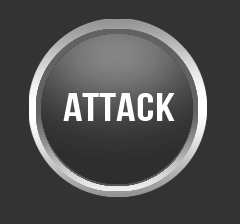
<style>
.page{position:relative;width:240px;height:224px;background:#333333}
.page>*{position:absolute;margin:0}
.t1{font:39.4px "BebasNeue";color:#ffffff;scale:1.22 1}
</style>
<div class="page">
<p class="t1" style="left:63px;top:93px;width:112px;height:28px">ATTACK</p>
</div>
